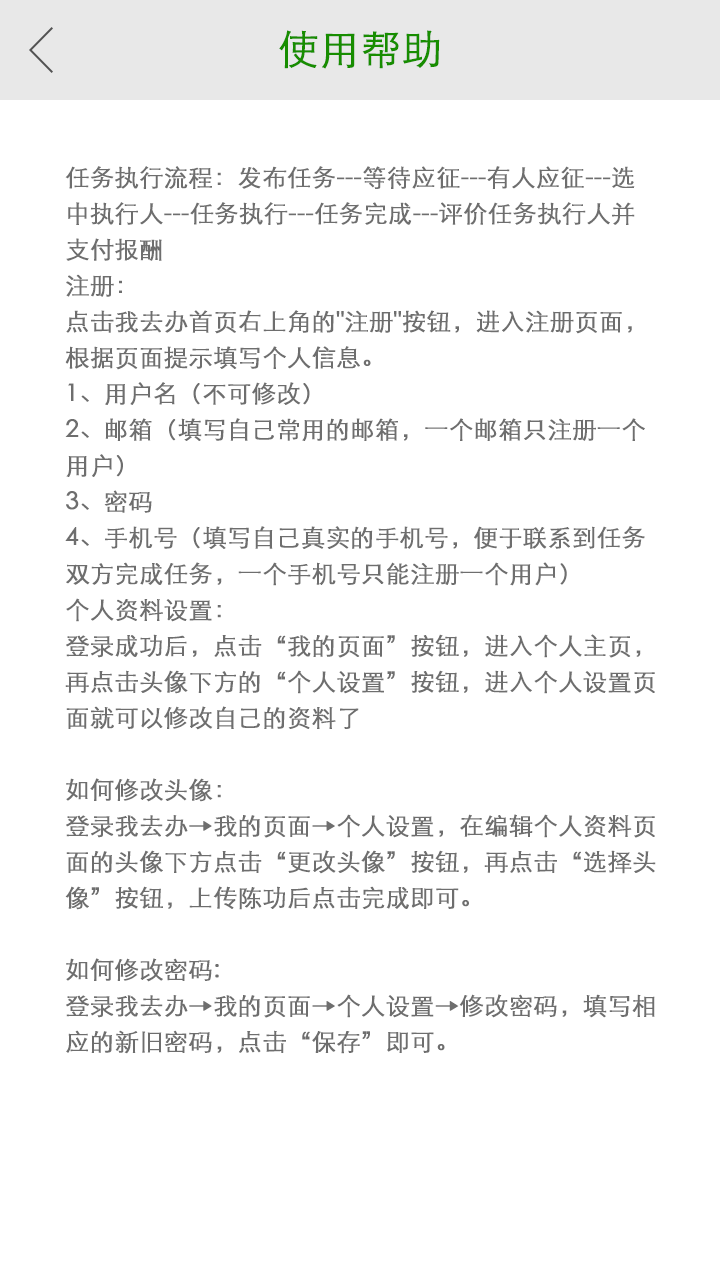
<style>
.page{position:relative;width:720px;height:1280px;background:#ffffff}
.page>*{position:absolute;margin:0}
.t1{font:40px "STXihei";color:#178d00;font-weight:bold}
.t2{font:24px/36px "STXihei";color:#6e6e6e;font-weight:bold}
.t3{font:24px/22px "STXihei";color:#6e6e6e;font-weight:bold}
</style>
<div class="page">
<p class="t1" style="left:279px;top:30px;width:161px;height:39px">使用帮助</p>
<p class="t2" style="left:65px;top:166px;width:591px;height:888px;text-align:justify"><span class="t3"><br></span>任务执行流程：发布任务---等待应征---有人应征---选<br>中执行人---任务执行---任务完成---评价任务执行人并<br>支付报酬<br>注册：<br>点击我去办首页右上角的"注册"按钮，进入注册页面，<br>根据页面提示填写个人信息。<br>1、用户名（不可修改）<br>2、邮箱（填写自己常用的邮箱，一个邮箱只注册一个<br>用户）<br>3、密码<br>4、手机号（填写自己真实的手机号，便于联系到任务<br>双方完成任务，一个手机号只能注册一个用户）<br>个人资料设置：<br>登录成功后，点击“我的页面”按钮，进入个人主页，<br>再点击头像下方的“个人设置”按钮，进入个人设置页<br>面就可以修改自己的资料了<br> <br>如何修改头像：<br>登录我去办→我的页面→个人设置，在编辑个人资料页<br>面的头像下方点击“更改头像”按钮，再点击“选择头<br>像”按钮，上传陈功后点击完成即可。<br> <br>如何修改密码:<br>登录我去办→我的页面→个人设置→修改密码，填写相<br>应的新旧密码，点击“保存”即可。</p>
</div>
